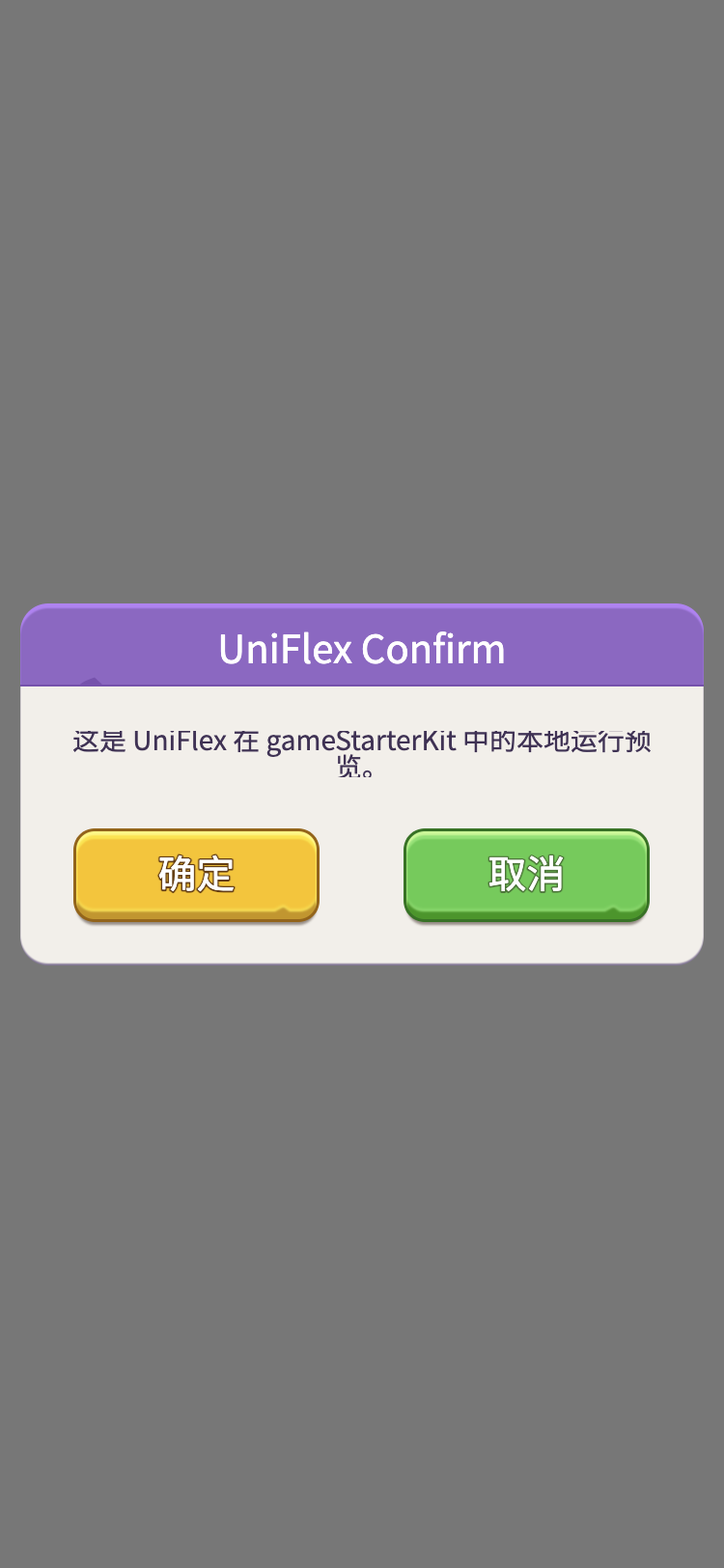
<style>
.page{position:relative;width:724px;height:1568px;background:#777777}
.page>*{position:absolute;margin:0}
.t1{font:38.6px "WebPSD-18463539-0-Regular";color:#ffffff}
.t2{font:27px/27px "WebPSD-18463539-0-Regular";color:#3f3254}
.t3{font:38.6px/38.6px "WebPSD-18463539-0-Regular";color:#ffffff}
</style>
<div class="page">
<p class="t1" style="left:107px;top:621px;width:510px;height:56px">UniFlex Confirm</p>
<p class="t2" style="left:59px;top:731px;width:606px;height:46px;text-align:center">这是 UniFlex 在 gameStarterKit 中的本地运行预<br>览。</p>
<p class="t3" style="left:81px;top:832px;width:231px;height:83px;text-align:center">确定</p>
<p class="t3" style="left:411px;top:832px;width:231px;height:83px;text-align:center">取消</p>
</div>
